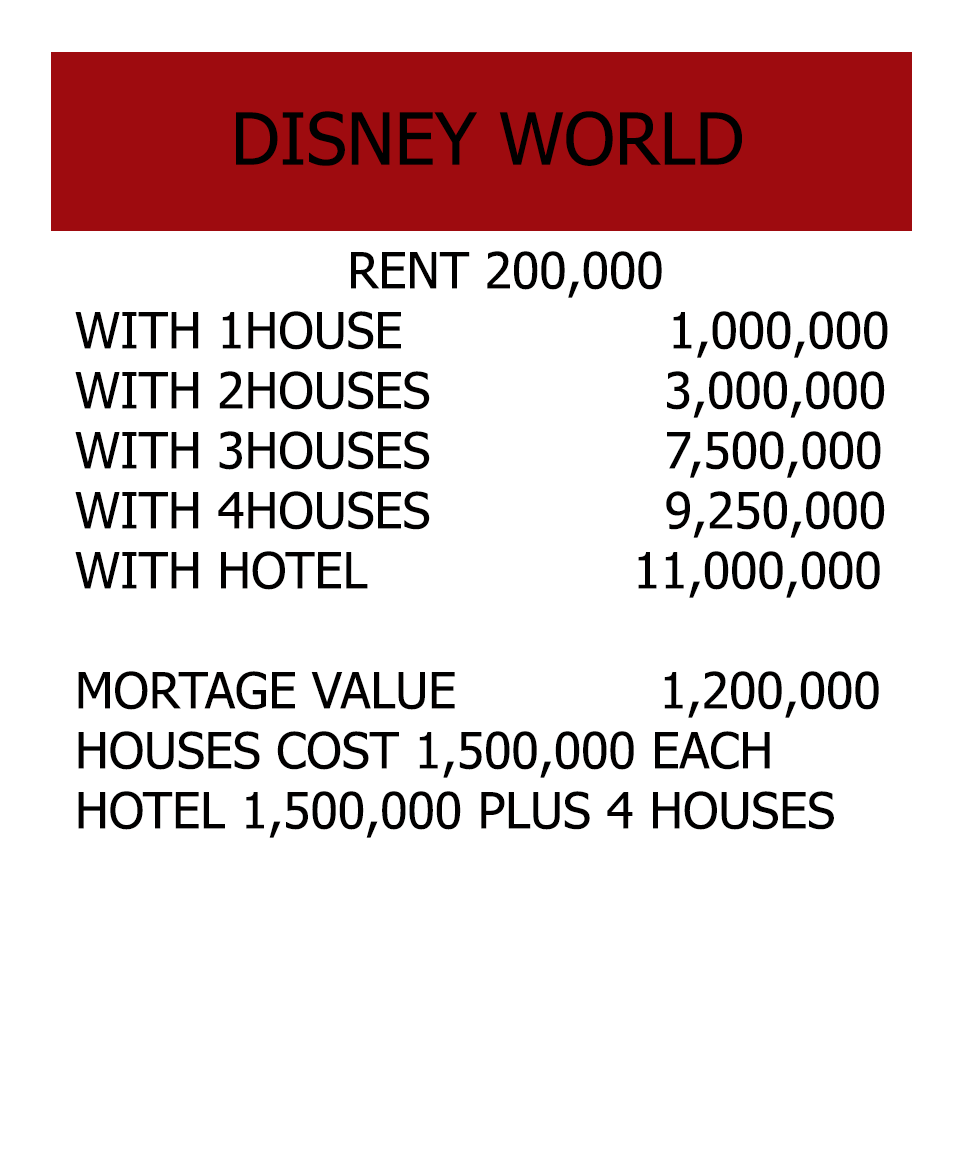
<style>
.page{position:relative;width:966px;height:1164px;background:#ffffff}
.page>*{position:absolute;margin:0}
.t1{font:72px "Tahoma";color:#000000}
.t2{font:50px "Tahoma";color:#010000}
</style>
<div class="page">
<p class="t1" style="left:236px;top:111px;width:506px;height:55px">DISNEY WORLD</p>
<p class="t2" style="left:75px;top:251px;width:813px;height:587px;text-align:center">RENT 200,000<br>WITH 1HOUSE                 1,000,000<br>WITH 2HOUSES               3,000,000<br>WITH 3HOUSES               7,500,000<br>WITH 4HOUSES               9,250,000<br>WITH HOTEL                 11,000,000<br><br>MORTAGE VALUE             1,200,000<br>HOUSES COST 1,500,000 EACH<br>HOTEL 1,500,000 PLUS 4 HOUSES</p>
</div>
